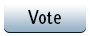
<style>
.page{position:relative;width:90px;height:36px;background:#ffffff}
.page>*{position:absolute;margin:0}
.t1{font:18px "BellGothicStd-Bold";color:#010101}
</style>
<div class="page">
<p class="t1" style="left:28px;top:10px;width:33px;height:14px">Vote</p>
</div>
